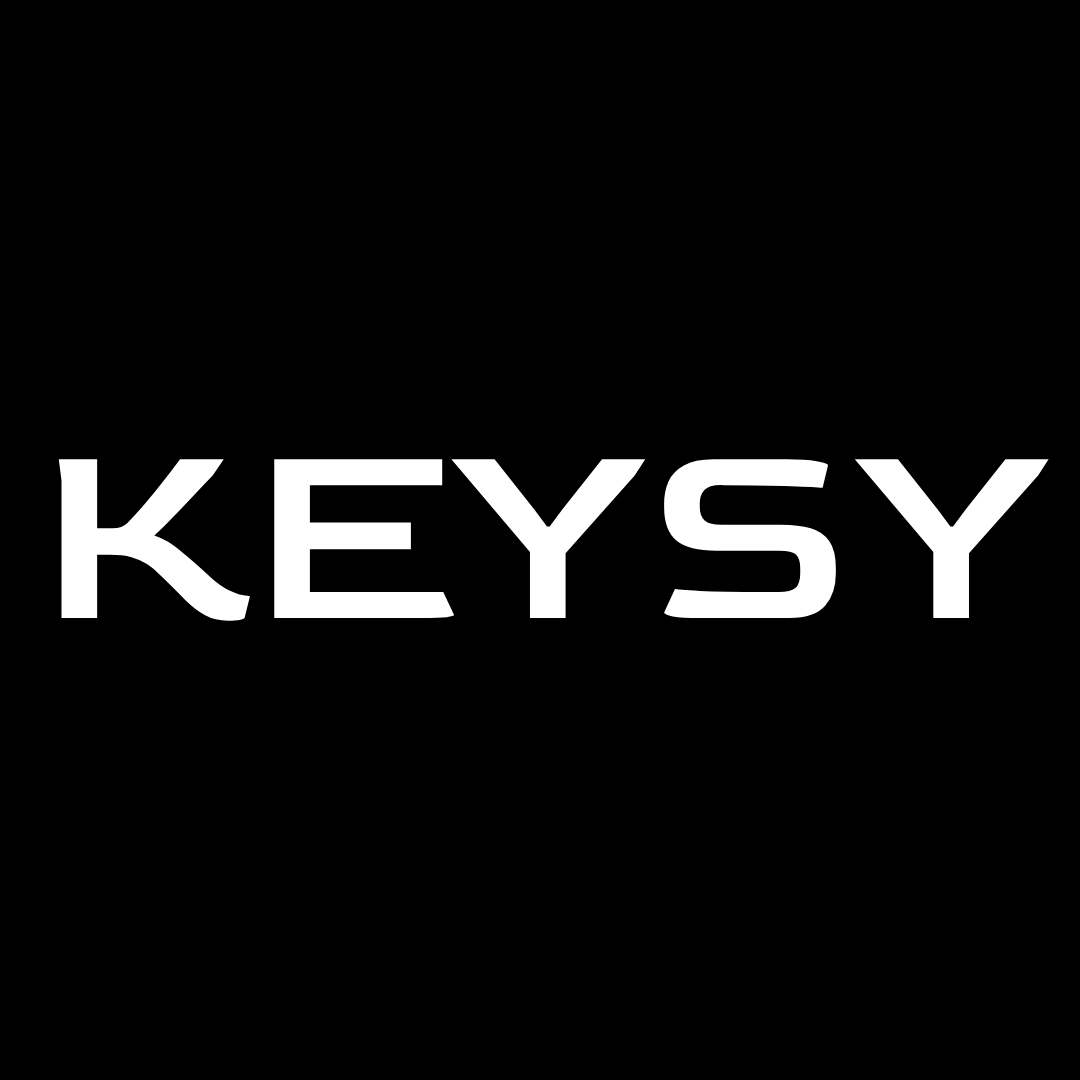
<style>
.page{position:relative;width:1080px;height:1080px;background:#000000}
.page>*{position:absolute;margin:0}
.t1{font:270px "Goldman-Regular";color:#ffffff}
</style>
<div class="page">
<p class="t1" style="left:58px;top:459px;width:991px;height:162px">KEYSY</p>
</div>
